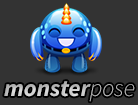
<style>
.page{position:relative;width:138px;height:105px;background:#333333}
.page>*{position:absolute;margin:0}
.t1{font:24px "SourceSansPro-BoldIt";color:#cacaca}
.t2{font:24px "SourceSansPro-LightIt";color:#cacaca}
</style>
<div class="page">
<p class="t1" style="left:4px;top:81px;width:131px;height:21px">monster<span class="t2">pose</span></p>
</div>
